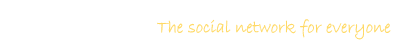
<style>
.page{position:relative;width:396px;height:44px;background:#ffffff}
.page>*{position:absolute;margin:0}
.t1{font:18px "BradleyHandITC";color:#ffd965}
</style>
<div class="page">
<p class="t1" style="left:157px;top:19px;width:234px;height:21px">The social network for everyone</p>
</div>
